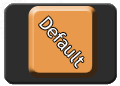
<style>
.page{position:relative;width:120px;height:86px;background:#2d2d2d}
.page>*{position:absolute;margin:0}
.t1{font:18px "TrebuchetMS";color:#ffffff}
</style>
<div class="page">
<p class="t1" style="left:39px;top:16px;width:45px;height:52px;rotate:49deg">Default</p>
</div>
